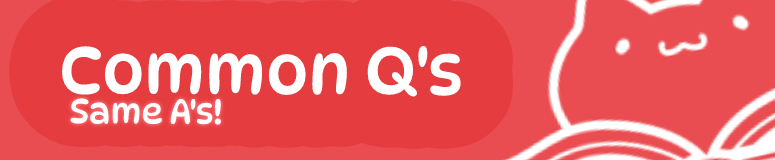
<style>
.page{position:relative;width:775px;height:160px;background:#e43c3f}
.page>*{position:absolute;margin:0}
.t1{font:67px "DynaPuff-Regular";color:#ffffff}
.t2{font:34px "DynaPuff-Regular";color:#ffffff}
</style>
<div class="page">
<p class="t1" style="left:62px;top:46px;width:399px;height:51px">Common Q's</p>
<p class="t2" style="left:70px;top:98px;width:151px;height:27px">Same A's!</p>
</div>
